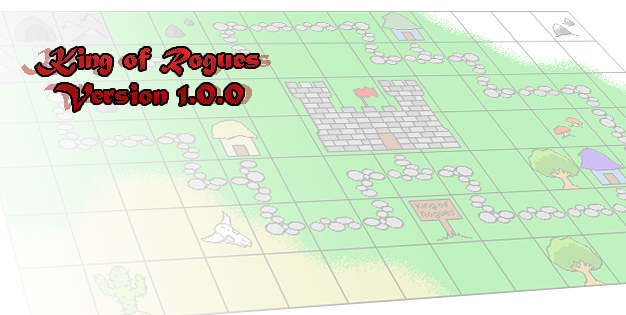
<style>
.page{position:relative;width:626px;height:315px}
.page>*{position:absolute;margin:0}
.t1{font:30px "MaturaMTScriptCapitals";scale:1.11 1}
.t2{font:30px "MaturaMTScriptCapitals"}
</style>
<div class="page">
<p class="t1" style="left:21px;top:48px;width:250px;height:63px;text-align:center">King of Rogues<br>Version 1.0.0</p>
<p class="t2" style="left:36px;top:48px;width:223px;height:63px;text-align:center">King of Rogues<br>Version 1.0.0</p>
</div>
